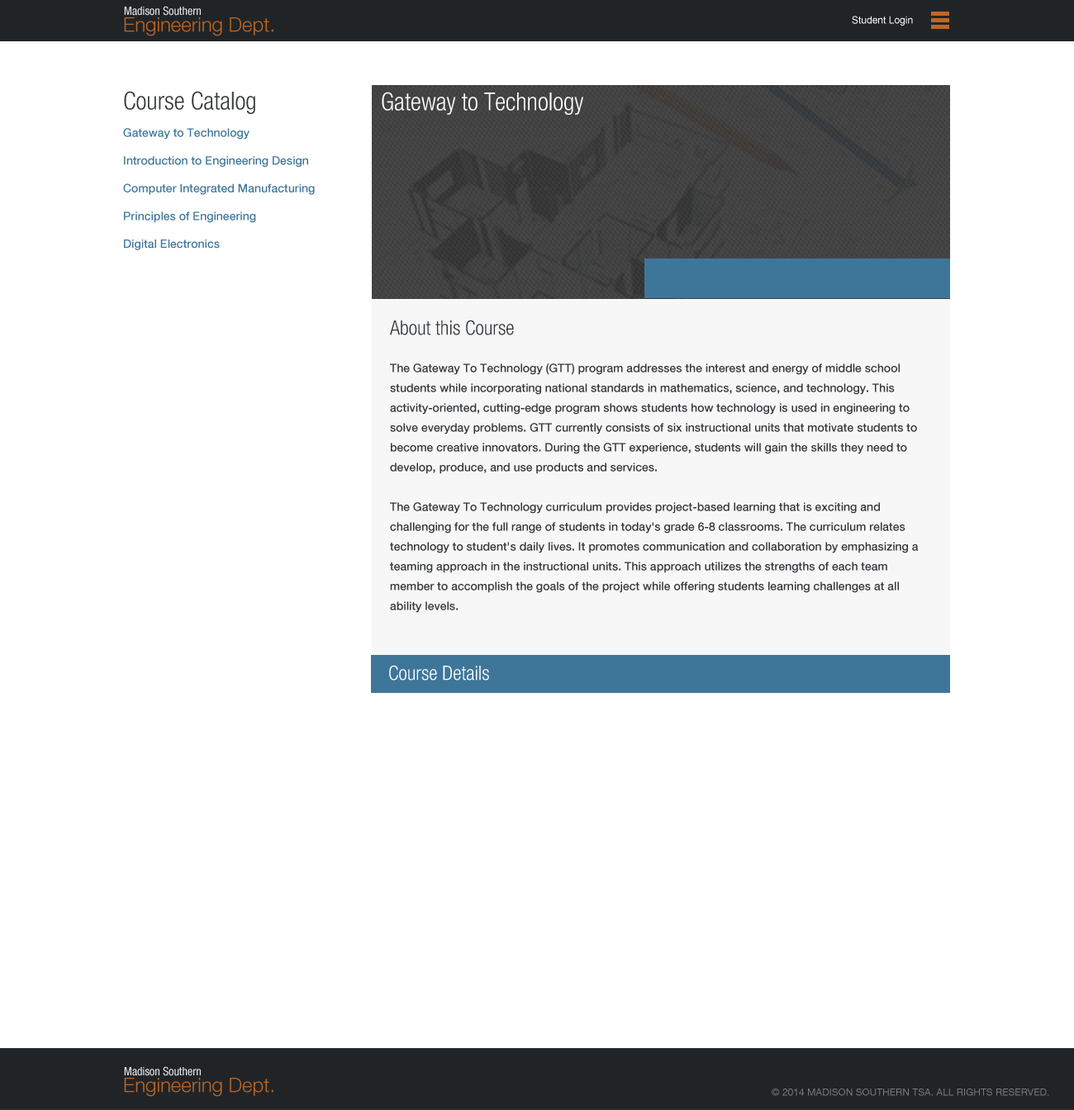
<style>
.page{position:relative;width:1074px;height:1110px;background:#ffffff}
.page>*{position:absolute;margin:0}
.t1{font:11.6px "HelveticaNeueLTCom-Cn";color:#e7e7e7}
.t2{font:19.8px "HelveticaNeueLTCom-Lt";color:#c16622}
.t3{font:9.9px "ArialMT";color:#ffffff}
.t4{font:24.8px "HelveticaNeueLTCom-LtCn";color:#343838}
.t5{font:24.8px "HelveticaNeueLTCom-LtCn";color:#ffffff}
.t6{font:11.6px "HelveticaNeueLTCom-Md";color:#3e769a}
.t7{font:19.8px "HelveticaNeueLTCom-LtCn";color:#313539}
.t8{font:11.6px/19.8px "HelveticaNeueLTCom-Md";color:#313539}
.t9{font:19.8px "HelveticaNeueLTCom-LtCn";color:#ffffff}
.t10{font:9.9px "HelveticaNeueLTCom-Roman";color:#7d7b7b}
</style>
<div class="page">
<p class="t1" style="left:124px;top:6px;width:77px;height:10px">Madison Southern</p>
<p class="t2" style="left:124px;top:17px;width:149px;height:19px">Engineering Dept.</p>
<p class="t3" style="left:852px;top:16px;width:61px;height:10px">Student Login</p>
<p class="t4" style="left:124px;top:91px;width:131px;height:23px">Course Catalog</p>
<p class="t5" style="left:382px;top:92px;width:202px;height:23px">Gateway to Technology</p>
<p class="t6" style="left:123px;top:128px;width:192px;height:122px">Gateway to Technology<br><br>Introduction to Engineering Design<br><br>Computer Integrated Manufacturing<br><br>Principles of Engineering<br><br>Digital Electronics</p>
<p class="t7" style="left:390px;top:320px;width:124px;height:15px">About this Course</p>
<p class="t8" style="left:390px;top:363px;width:529px;height:250px">The Gateway To Technology (GTT) program addresses the interest and energy of middle school<br>students while incorporating national standards in mathematics, science, and technology. This activity-oriented, cutting-edge program shows students how technology is used in engineering to solve everyday problems. GTT currently consists of six instructional units that motivate students to become creative innovators. During the GTT experience, students will gain the skills they need to develop, produce, and use products and services.<br><br>The Gateway To Technology curriculum provides project-based learning that is exciting and<br>challenging for the full range of students in today's grade 6-8 classrooms. The curriculum relates<br>technology to student's daily lives. It promotes communication and collaboration by emphasizing a teaming approach in the instructional units. This approach utilizes the strengths of each team member to accomplish the goals of the project while offering students learning challenges at all<br>ability levels.</p>
<p class="t9" style="left:389px;top:665px;width:100px;height:16px">Course Details</p>
<p class="t1" style="left:124px;top:1067px;width:77px;height:9px">Madison Southern</p>
<p class="t2" style="left:124px;top:1078px;width:149px;height:19px">Engineering Dept.</p>
<p class="t10" style="left:772px;top:1089px;width:277px;height:7px">© 2014 MADISON SOUTHERN TSA. ALL RIGHTS RESERVED.</p>
</div>
